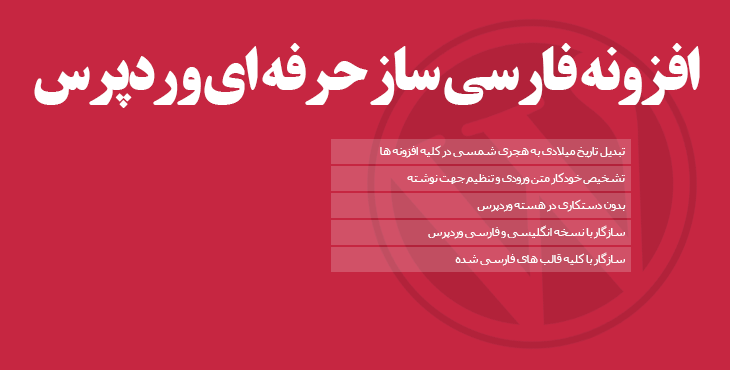
<style>
.page{position:relative;width:730px;height:370px;background:#c62641}
.page>*{position:absolute;margin:0}
.t1{font:60px "BTitrBold";letter-spacing:-0.05em;color:#ffffff}
.t2{font:12px "Tahoma";letter-spacing:-0.05em;color:#ffffff}
</style>
<div class="page">
<p class="t1" style="left:34px;top:43px;width:666px;height:65px">افزونه فارسی ساز حرفه ای وردپرس</p>
<p class="t2" style="left:380px;top:145px;width:245px;height:13px">تبدیل تاریخ میلادی به هجری شمسی در کلیه افزونه ها</p>
<p class="t2" style="left:407px;top:172px;width:218px;height:13px">تشخیص خودکار متن ورودی و تنظیم جهت نوشته</p>
<p class="t2" style="left:477px;top:199px;width:149px;height:13px">بدون دستکاری در هسته وردپرس</p>
<p class="t2" style="left:428px;top:225px;width:197px;height:14px">سازگار با نسخه انگلیسی و فارسی وردپرس</p>
<p class="t2" style="left:455px;top:252px;width:170px;height:14px">سازگار با کلیه قالب های فارسی شده</p>
</div>
